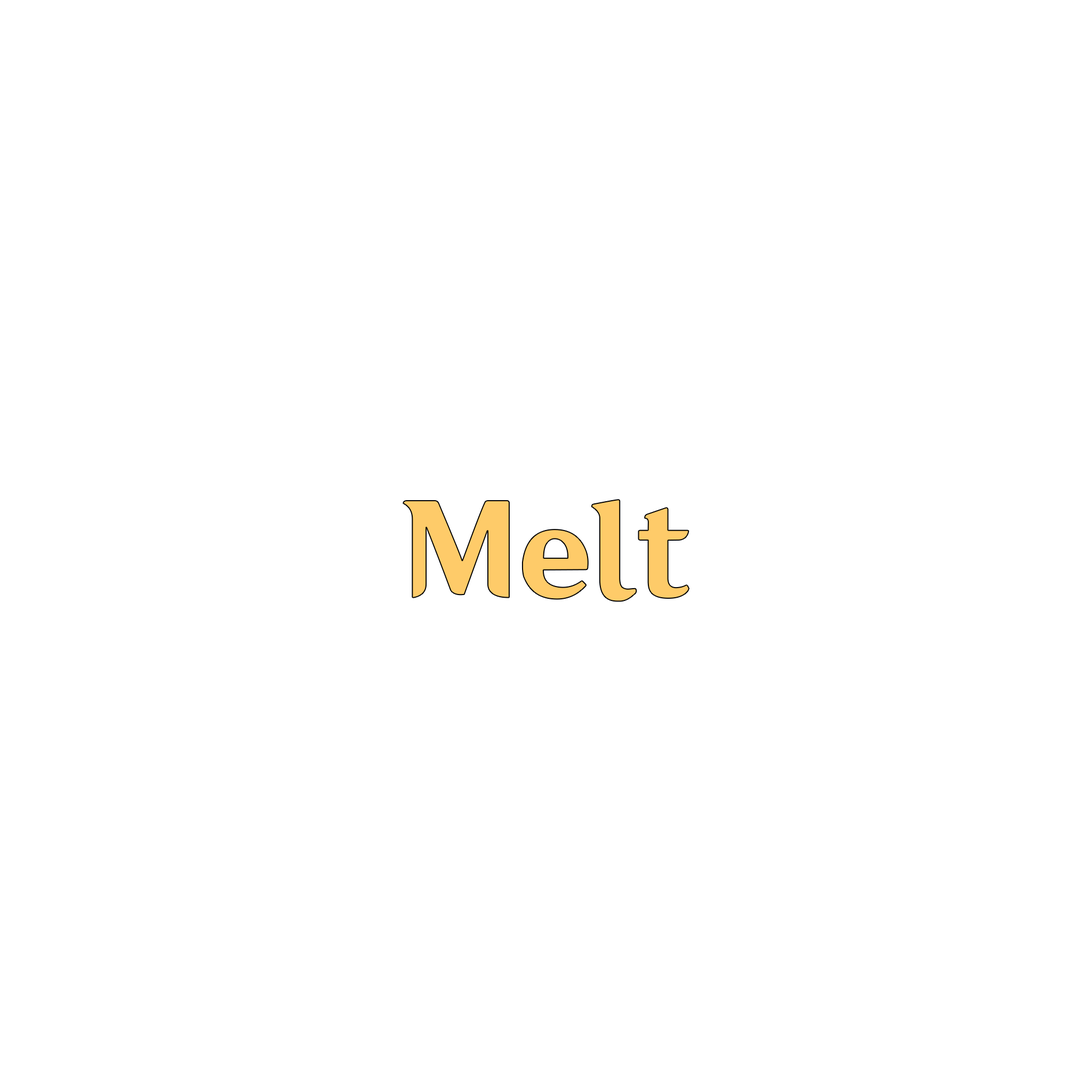
<style>
.page{position:relative;width:1092px;height:1092px;background:#ffffff}
.page>*{position:absolute;margin:0}
.t1{font:122.2px "Default_SC-85W";color:#fecb69}
</style>
<div class="page">
<p class="t1" style="left:403px;top:500px;width:286px;height:101px">Melt</p>
</div>
